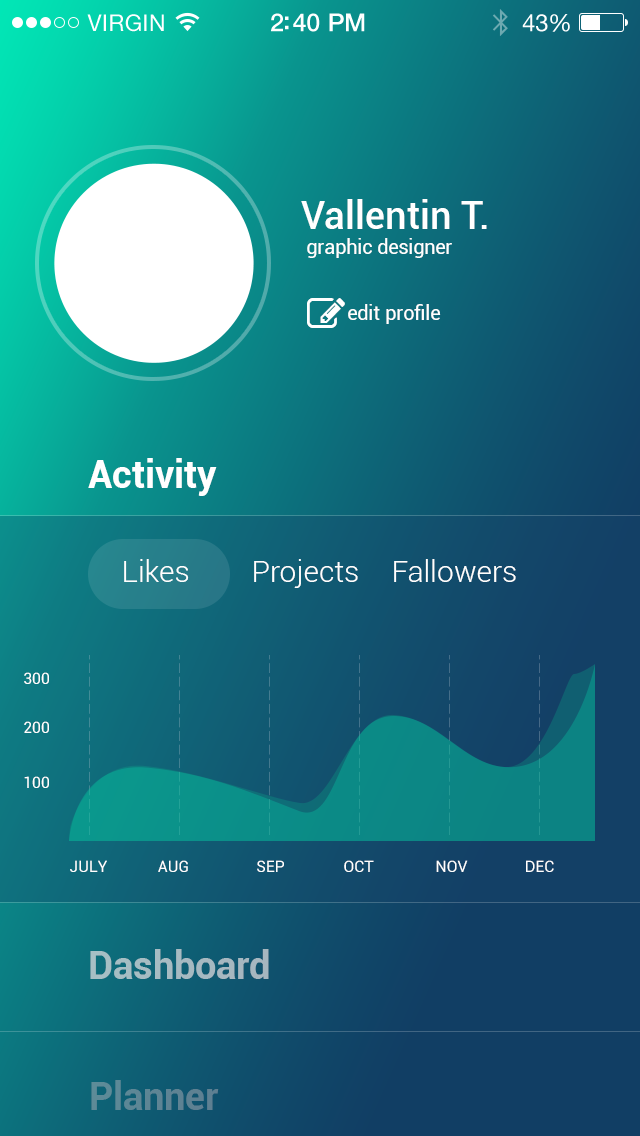
<style>
.page{position:relative;width:640px;height:1136px}
.page>*{position:absolute;margin:0}
.t1{font:38px "Roboto-Medium";color:#ffffff}
.t2{font:20px "Roboto-Regular";color:#ffffff}
.t3{font:38px "Roboto-Bold";color:#ffffff}
.t4{font:30px "Roboto-Light";color:#ffffff}
.t5{font:15.8px "Roboto-Regular";color:#ffffff}
.t6{font:38px "Roboto-Bold";color:#a6bbc2}
.t7{font:38px "Roboto-Bold";color:#5d8594}
</style>
<div class="page">
<p class="t1" style="left:301px;top:199px;width:186px;height:30px">Vallentin T.</p>
<p class="t2" style="left:307px;top:238px;width:145px;height:20px">graphic designer</p>
<p class="t2" style="left:348px;top:304px;width:93px;height:20px">edit profile</p>
<p class="t3" style="left:88px;top:458px;width:129px;height:38px">Activity</p>
<p class="t4" style="left:124px;top:559px;width:65px;height:23px">Likes</p>
<p class="t4" style="left:254px;top:559px;width:104px;height:29px">Projects</p>
<p class="t4" style="left:394px;top:559px;width:122px;height:23px">Fallowers</p>
<p class="t5" style="left:24px;top:672px;width:25px;height:12px">300</p>
<p class="t5" style="left:24px;top:721px;width:25px;height:12px">200</p>
<p class="t5" style="left:24px;top:776px;width:25px;height:12px">100</p>
<p class="t5" style="left:70px;top:860px;width:37px;height:12px">JULY</p>
<p class="t5" style="left:158px;top:860px;width:30px;height:12px">AUG</p>
<p class="t5" style="left:257px;top:860px;width:27px;height:12px">SEP</p>
<p class="t5" style="left:344px;top:860px;width:30px;height:12px">OCT</p>
<p class="t5" style="left:436px;top:860px;width:32px;height:12px">NOV</p>
<p class="t5" style="left:526px;top:860px;width:28px;height:12px">DEC</p>
<p class="t6" style="left:90px;top:949px;width:179px;height:30px">Dashboard</p>
<p class="t7" style="left:91px;top:1080px;width:128px;height:30px">Planner</p>
</div>
